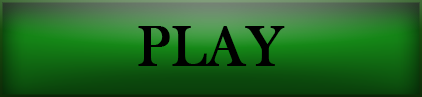
<style>
.page{position:relative;width:422px;height:97px}
.page>*{position:absolute;margin:0}
.t1{font:58.3px "BaskOldFace";color:#000000;font-weight:bold;scale:0.95 1}
</style>
<div class="page">
<p class="t1" style="left:138px;top:26px;width:147px;height:40px">PLAY</p>
</div>
